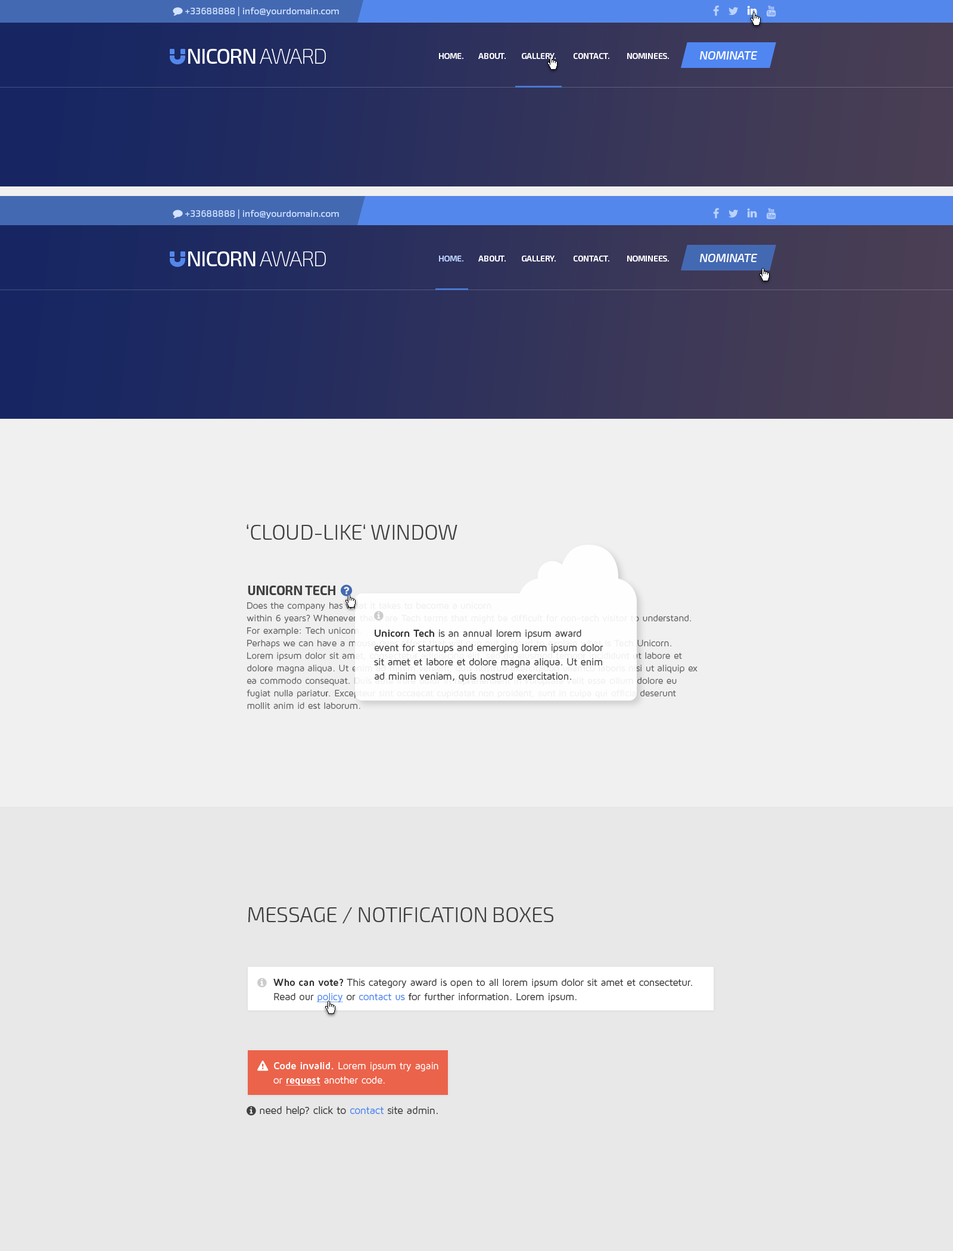
<style>
.page{position:relative;width:953px;height:1251px;background:#e8e8e8}
.page>*{position:absolute;margin:0}
.t1{font:9.5px "Exo2-Regular";letter-spacing:0.005em;color:#d1e3ff}
.t2{font:21.4px "Exo2-Medium";letter-spacing:-0.05em;color:#ffffff;text-transform:uppercase}
.t3{font:21.4px "Exo2-ExtraLight";letter-spacing:-0.05em;color:#ffffff;text-transform:uppercase}
.t4{font:8.3px "Exo2-SemiBold";letter-spacing:-0.015em;color:#ffffff;text-transform:uppercase}
.t5{font:11.9px "Exo2-MediumItalic";letter-spacing:-0.01em;color:#ffffff;text-transform:uppercase}
.t6{font:8.3px "Exo2-SemiBold";letter-spacing:-0.015em;color:#bbd2ff;text-transform:uppercase}
.t7{font:21.4px "Exo2-Light";letter-spacing:-0.015em;color:#404040}
.t8{font:13.1px "Exo2-Bold";letter-spacing:-0.015em;color:#404040}
.t9{font:9.5px/12.5px "MavenProRegular";letter-spacing:-0.005em}
.t10{font:10.1px/14.3px "MavenProRegular";letter-spacing:-0.005em;color:#404040}
.t11{font:10.1px/14.3px "MavenProBold";letter-spacing:-0.005em;color:#333333}
.t12{font:10.1px/14.3px "MavenProRegular";letter-spacing:-0.005em;color:#5086f2;text-decoration:underline}
.t13{font:10.1px/14.3px "MavenProRegular";letter-spacing:-0.005em;color:#5086f2}
.t14{font:10.1px/14.3px "MavenProRegular";letter-spacing:-0.005em;color:#ffffff}
.t15{font:10.1px/14.3px "MavenProBold";letter-spacing:-0.005em;color:#ffffff}
.t16{font:10.1px/14.3px "MavenProBold";letter-spacing:-0.005em;color:#ffffff;text-decoration:underline}
.t17{font:10.7px "MavenProRegular";letter-spacing:-0.015em;color:#404040}
.t18{font:10.7px "MavenProRegular";letter-spacing:-0.015em;color:#5086f2}
</style>
<div class="page">
<p class="t1" style="left:185px;top:7px;width:154px;height:10px">+33688888 | info@yourdomain.com</p>
<p class="t2" style="left:188px;top:49px;width:138px;height:15px">NICORN <span class="t3">AWARD</span></p>
<p class="t4" style="left:439px;top:53px;width:230px;height:6px">Home.         ABOUT.         GALLERY.          CONTACT.          NOMINEES.</p>
<p class="t5" style="left:700px;top:51px;width:58px;height:9px">NOMINATE</p>
<p class="t1" style="left:185px;top:209px;width:154px;height:10px">+33688888 | info@yourdomain.com</p>
<p class="t2" style="left:188px;top:251px;width:138px;height:15px">NICORN <span class="t3">AWARD</span></p>
<p class="t4" style="left:439px;top:256px;width:230px;height:6px"><span class="t6">Home. </span>        ABOUT.         GALLERY.          CONTACT.          NOMINEES.</p>
<p class="t5" style="left:700px;top:254px;width:58px;height:8px">NOMINATE</p>
<p class="t7" style="left:247px;top:524px;width:211px;height:16px">‘CLOUD-LIKE‘ WINDOW</p>
<p class="t8" style="left:248px;top:586px;width:87px;height:9px">UNICORN TECH</p>
<p class="t9" style="left:247px;top:602px;width:451px;height:107px">Does the company has what it takes to become a unicorn<br>within 6 years? Whenever there are Tech terms that might be difficult for non-tech visitor to understand. For example: Tech unicorn. <br>Perhaps we can have a mouse over effect that will pop out a cloud to explain what is Tech Unicorn. Lorem ipsum dolor sit amet, consectetur adipisicing elit, sed do eiusmod tempor incididunt ut labore et dolore magna aliqua. Ut enim ad minim veniam, quis nostrud exercitation ullamco laboris nisi ut aliquip ex ea commodo consequat. Duis aute irure dolor in reprehenderit in voluptate velit esse cillum dolore eu fugiat nulla pariatur. Excepteur sint occaecat cupidatat non proident, sunt in culpa qui officia deserunt mollit anim id est laborum.</p>
<p class="t10" style="left:374px;top:630px;width:229px;height:52px"><span class="t11">Unicorn Tech </span>is an annual lorem ipsum award event for startups and emerging lorem ipsum dolor sit amet et labore et dolore magna aliqua. Ut enim ad minim veniam, quis nostrud exercitation.</p>
<p class="t7" style="left:248px;top:907px;width:305px;height:17px">MESSAGE / NOTIFICATION BOXES</p>
<p class="t10" style="left:273px;top:979px;width:419px;height:24px"><span class="t11">Who can vote? </span>This category award is open to all lorem ipsum dolor sit amet et consectetur. Read our <span class="t12">policy</span> or <span class="t13">contact us</span> for further information. Lorem ipsum.</p>
<p class="t14" style="left:273px;top:1062px;width:165px;height:24px"><span class="t15">Code invalid.</span> Lorem ipsum try again or <span class="t16">request</span> another code.</p>
<p class="t17" style="left:260px;top:1106px;width:178px;height:10px">need help? click to <span class="t18">contact</span> site admin.</p>
</div>
